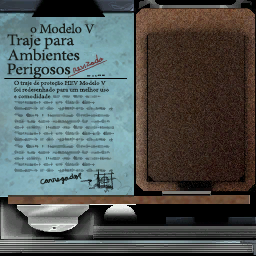
<style>
.page{position:relative;width:256px;height:256px}
.page>*{position:absolute;margin:0}
.t1{font:11.5px "AdobeHebrew-Regular";color:#181c18;scale:1.1 1}
.t2{font:13.3px "AdobeHebrew-Regular";letter-spacing:-0.02em;color:#181c18;scale:1.03 1}
.t3{font:15.9px "AdobeHebrew-Regular";letter-spacing:-0.02em;color:#181c18;scale:1.06 1}
.t4{font:5.9px/6.7px "AdobeHebrew-Regular";letter-spacing:-0.02em;color:#181c18;scale:1.11 1}
</style>
<div class="page">
<p class="t1" style="left:30px;top:27px;width:7px;height:6px">o</p>
<p class="t2" style="left:39px;top:23px;width:56px;height:11px">Modelo V</p>
<p class="t3" style="left:7px;top:34px;width:68px;height:16px">Traje para</p>
<p class="t3" style="left:7px;top:48px;width:73px;height:13px">Ambientes</p>
<p class="t3" style="left:7px;top:63px;width:64px;height:16px">Perigosos</p>
<p class="t4" style="left:14px;top:80px;width:95px;height:19px">O traje de proteção HEV Modelo V<br>foi redesenhado para um melhor uso<br>e comodidade</p>
</div>
